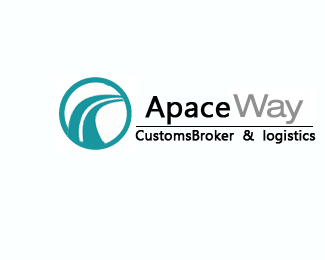
<style>
.page{position:relative;width:325px;height:260px;background:#fcffff}
.page>*{position:absolute;margin:0}
.t1{font:30px "SegoeUISymbol";color:#000101;font-weight:bold}
.t2{font:14px "SegoeUISymbol";color:#000101;font-weight:bold}
</style>
<div class="page">
<p class="t1" style="left:145px;top:96px;width:85px;height:29px">Apace</p>
<p class="t2" style="left:135px;top:130px;width:181px;height:14px">CustomsBroker  &amp;  logistics</p>
</div>
